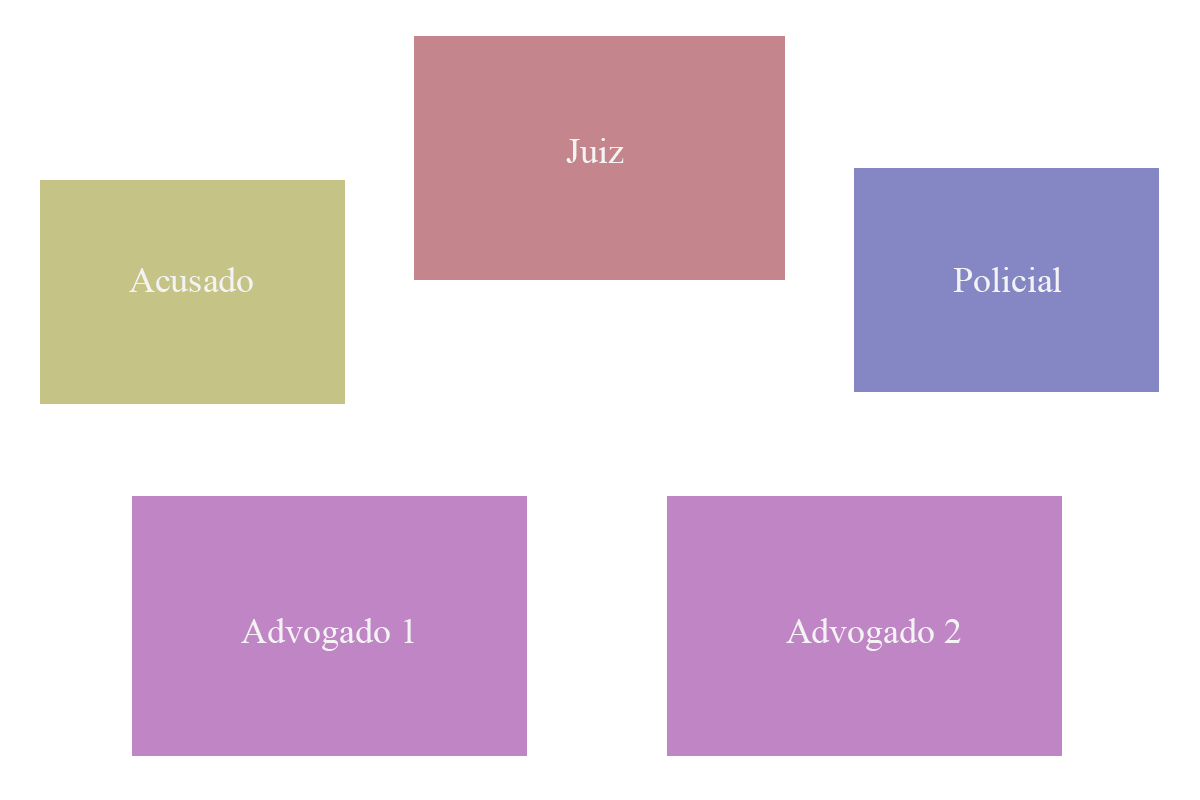
<style>
.page{position:relative;width:1200px;height:800px;background:#ffffff}
.page>*{position:absolute;margin:0}
.t1{font:36px "TimesNewRomanPSMT";color:#f3f3f3}
</style>
<div class="page">
<p class="t1" style="left:566px;top:138px;width:58px;height:25px">Juiz</p>
<p class="t1" style="left:129px;top:267px;width:124px;height:25px">Acusado</p>
<p class="t1" style="left:953px;top:267px;width:109px;height:25px">Policial</p>
<p class="t1" style="left:241px;top:618px;width:173px;height:33px">Advogado 1</p>
<p class="t1" style="left:786px;top:618px;width:175px;height:33px">Advogado 2</p>
</div>
